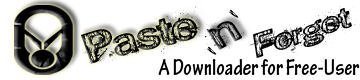
<style>
.page{position:relative;width:360px;height:80px;background:#ffffff}
.page>*{position:absolute;margin:0}
.t1{font:43px "SEXtalk69";color:#000000;scale:1.27 1}
.t2{font:31.7px "SEXtalk69";color:#000000;scale:1.3 1}
.t3{font:11.7px "SEXtalk69";color:#000000;scale:7.2 1}
.t4{font:43.6px "SEXtalk69";scale:1.4 1}
.t5{font:23.4px "TektonPro-BoldCond";color:#000000;scale:0.96 1}
</style>
<div class="page">
<p class="t1" style="left:81px;top:6px;width:119px;height:58px;rotate:-13deg">Paste</p>
<p class="t2" style="left:249px;top:6px;width:107px;height:52px;rotate:-18deg">Forget</p>
<p class="t3" style="left:229px;top:9px;width:10px;height:9px;rotate:44deg">,</p>
<p class="t4" style="left:193px;top:21px;width:51px;height:32px;rotate:-28deg">n</p>
<p class="t3" style="left:207px;top:46px;width:10px;height:9px;rotate:44deg">,</p>
<p class="t5" style="left:158px;top:59px;width:202px;height:16px">A Downloader for Free-User</p>
</div>
